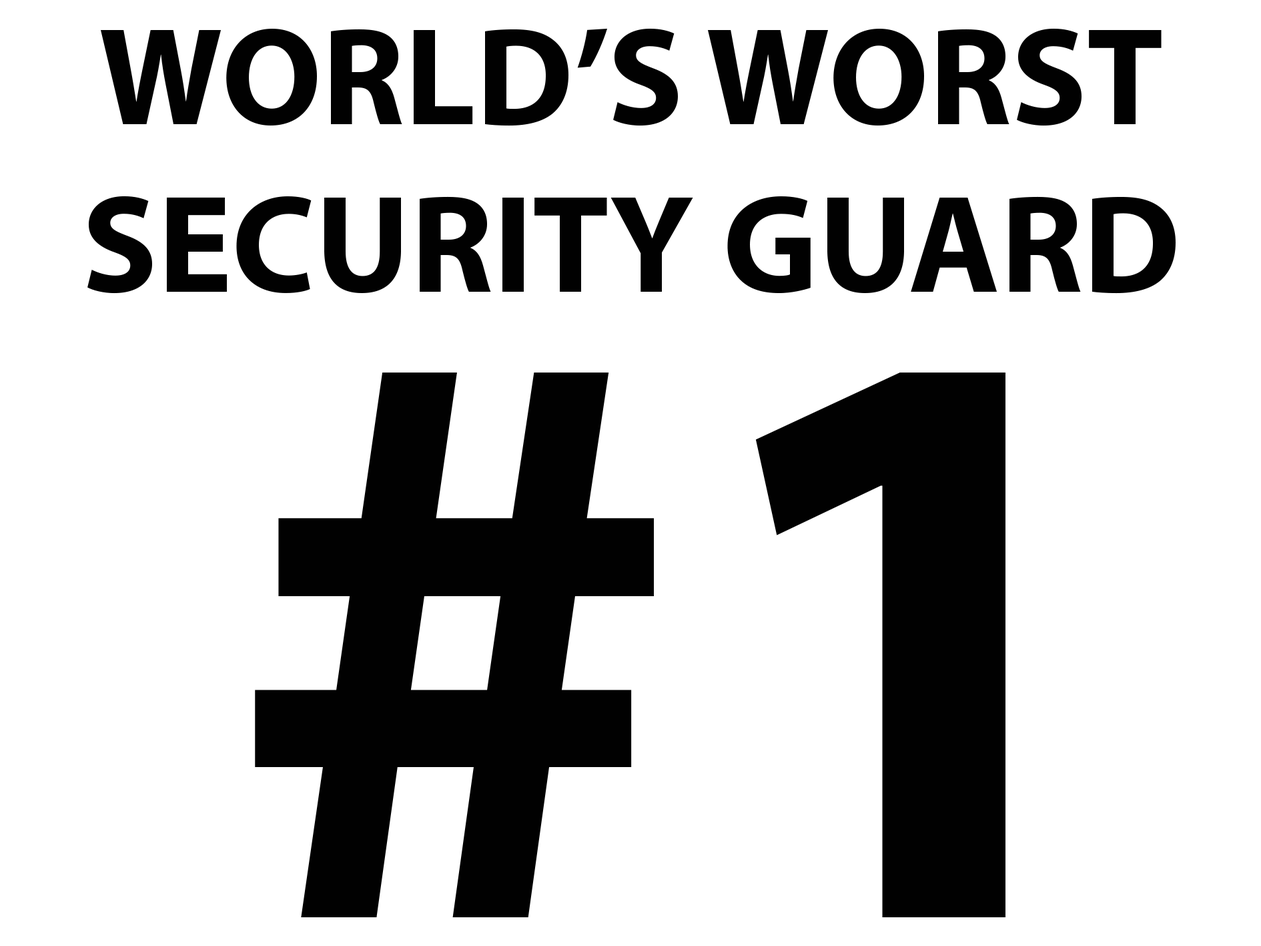
<style>
.page{position:relative;width:1261px;height:946px;background:#ffffff}
.page>*{position:absolute;margin:0}
.t1{font:33.5px "MyriadPro-Bold";color:#010101}
.t2{font:837.8px "MyriadPro-Bold";color:#010101}
</style>
<div class="page">
<p class="t1" style="left:87px;top:28px;width:1089px;height:266px;text-align:center">WORLD’S WORST<br>SECURITY GUARD</p>
<p class="t2" style="left:255px;top:372px;width:751px;height:545px">#1</p>
</div>
